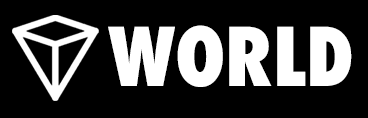
<style>
.page{position:relative;width:368px;height:118px;background:#000000}
.page>*{position:absolute;margin:0}
.t1{font:78.7px "Futura-CondensedExtraBold";color:#ffffff}
</style>
<div class="page">
<p class="t1" style="left:108px;top:25px;width:244px;height:62px">WORLD</p>
</div>
